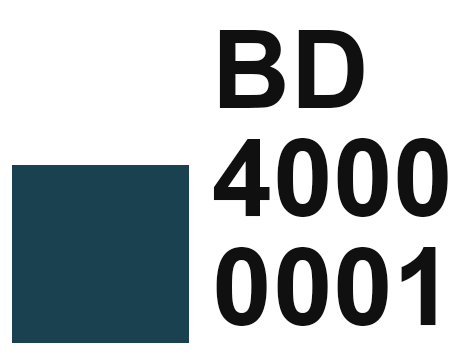
<style>
.page{position:relative;width:472px;height:354px;background:#ffffff}
.page>*{position:absolute;margin:0}
.t1{font:108.3px/108.3px "Arial-BoldMT";color:#101010}
</style>
<div class="page">
<p class="t1" style="left:213px;top:30px;width:235px;height:296px">BD<br>4000<br>0001</p>
</div>
